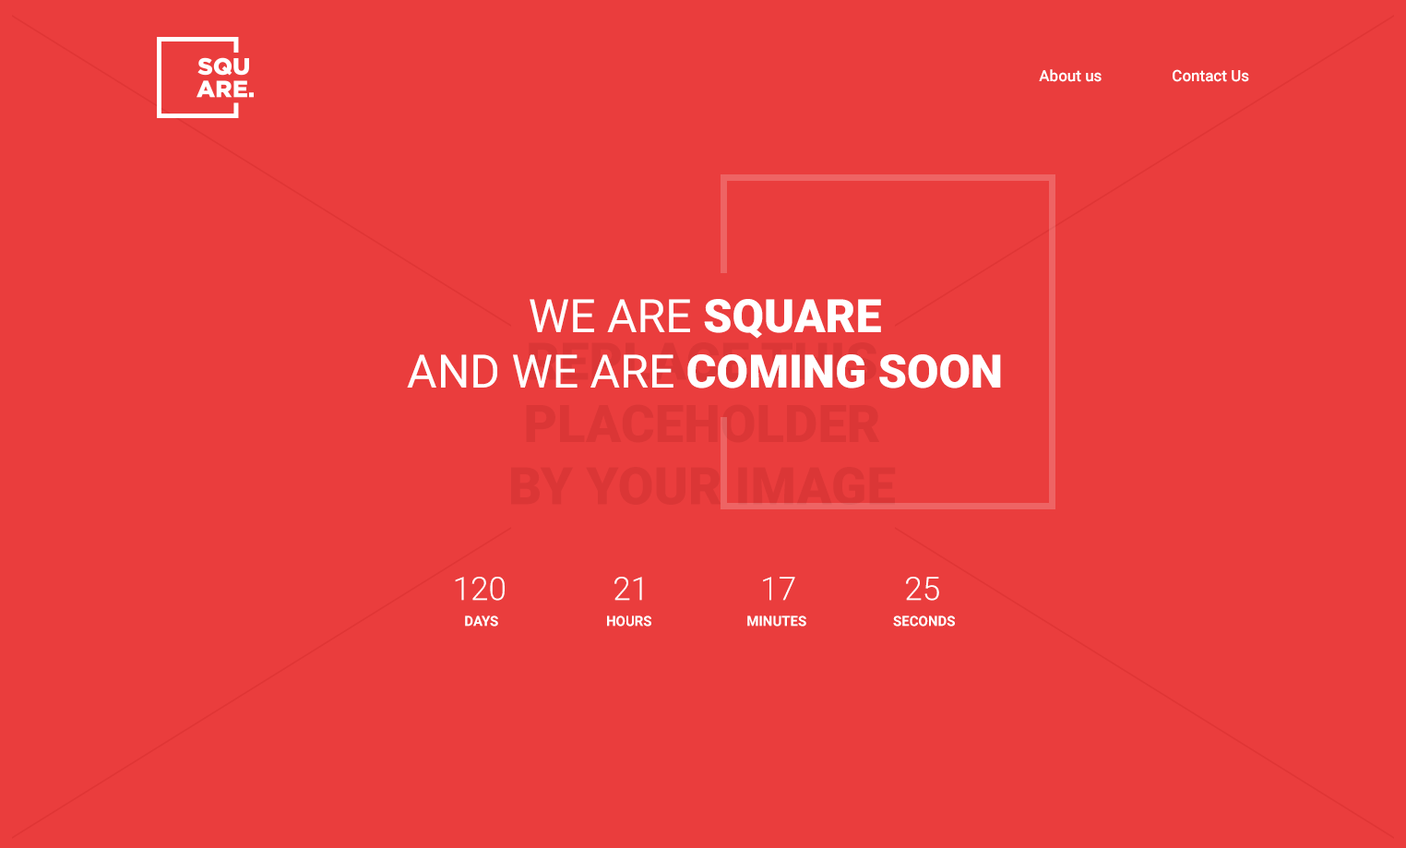
<style>
.page{position:relative;width:1406px;height:848px;background:#ea3d3d}
.page>*{position:absolute;margin:0}
.t1{font:15.7px "Roboto-Medium";color:#ffffff}
.t2{font:46.1px "Roboto-Black";color:#ffffff}
.t3{font:46.1px "Roboto-Regular";color:#ffffff}
.t4{font:32.3px "Roboto-Light";color:#ffffff}
.t5{font:13.8px "Roboto-Bold";color:#ffffff;text-transform:uppercase}
</style>
<div class="page">
<p class="t1" style="left:1039px;top:69px;width:210px;height:13px">About us   Contact Us</p>
<p class="t2" style="left:407px;top:299px;width:594px;height:89px;text-align:center"><span class="t3">WE ARE</span> SQUARE<br><span class="t3">AND WE ARE </span>COMING SOON</p>
<p class="t4" style="left:455px;top:577px;width:50px;height:24px">120</p>
<p class="t4" style="left:615px;top:577px;width:27px;height:24px">21</p>
<p class="t4" style="left:763px;top:577px;width:32px;height:24px">17</p>
<p class="t4" style="left:906px;top:577px;width:33px;height:24px">25</p>
<p class="t5" style="left:465px;top:615px;width:33px;height:12px">days</p>
<p class="t5" style="left:607px;top:615px;width:44px;height:12px">HouRS</p>
<p class="t5" style="left:747px;top:615px;width:59px;height:12px">Minutes</p>
<p class="t5" style="left:893px;top:615px;width:62px;height:12px">Seconds</p>
</div>
